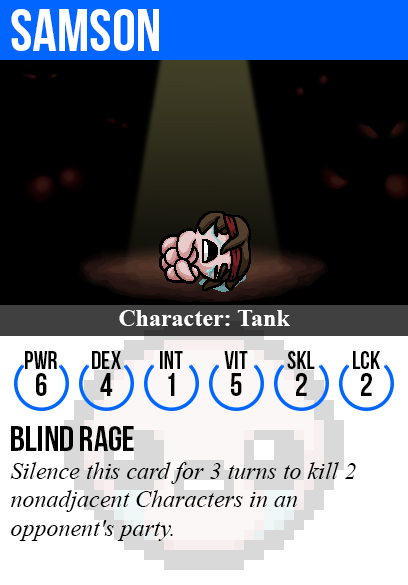
<style>
.page{position:relative;width:408px;height:585px;background:#000000}
.page>*{position:absolute;margin:0}
.t1{font:60px "BebasNeue";color:#ffffff}
.t2{font:24px "TimesNewRomanPS-BoldMT";color:#ffffff}
.t3{font:25px "BebasNeue";color:#000000}
.t4{font:32px "BebasNeue";color:#000000}
.t5{font:36px "BebasNeue";color:#000000}
.t6{font:24px "TimesNewRomanPS-ItalicMT";color:#000000}
</style>
<div class="page">
<p class="t1" style="left:11px;top:9px;width:148px;height:42px">samson</p>
<p class="t2" style="left:119px;top:310px;width:171px;height:16px">Character: Tank</p>
<p class="t3" style="left:25px;top:351px;width:32px;height:18px">PWR</p>
<p class="t3" style="left:92px;top:351px;width:29px;height:18px">dex</p>
<p class="t3" style="left:160px;top:351px;width:23px;height:18px">int</p>
<p class="t3" style="left:224px;top:351px;width:24px;height:18px">vit</p>
<p class="t3" style="left:287px;top:351px;width:28px;height:18px">skl</p>
<p class="t3" style="left:353px;top:351px;width:27px;height:18px">lck</p>
<p class="t4" style="left:36px;top:373px;width:11px;height:23px">6</p>
<p class="t4" style="left:100px;top:373px;width:13px;height:23px">4</p>
<p class="t4" style="left:168px;top:373px;width:7px;height:23px">1</p>
<p class="t4" style="left:231px;top:373px;width:11px;height:23px">5</p>
<p class="t4" style="left:296px;top:373px;width:11px;height:23px">2</p>
<p class="t4" style="left:361px;top:373px;width:11px;height:23px">2</p>
<p class="t5" style="left:11px;top:426px;width:123px;height:25px">blind rage</p>
<p class="t6" style="left:10px;top:462px;width:346px;height:79px">Silence this card for 3 turns to kill 2<br>nonadjacent Characters in an<br>opponent's party.</p>
</div>
